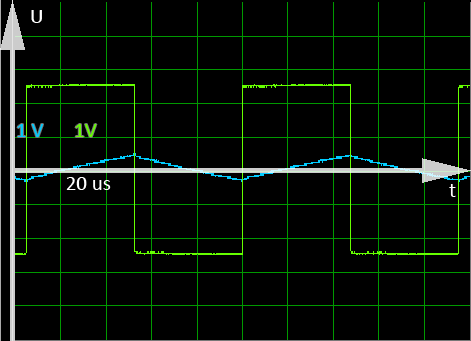
<style>
.page{position:relative;width:471px;height:341px;background:#000000}
.page>*{position:absolute;margin:0}
.t1{font:36px "Calibri";color:#ffffff}
.t2{font:36px "Calibri";color:#00ccff}
.t3{font:36px "Calibri";color:#66ff00}
</style>
<div class="page">
<p class="t1" style="left:31px;top:10px;width:11px;height:13px">U</p>
<p class="t2" style="left:17px;top:124px;width:26px;height:13px">1 V</p>
<p class="t3" style="left:75px;top:124px;width:22px;height:13px">1V</p>
<p class="t1" style="left:66px;top:177px;width:45px;height:13px">20 us</p>
<p class="t1" style="left:449px;top:184px;width:7px;height:13px">t</p>
</div>
